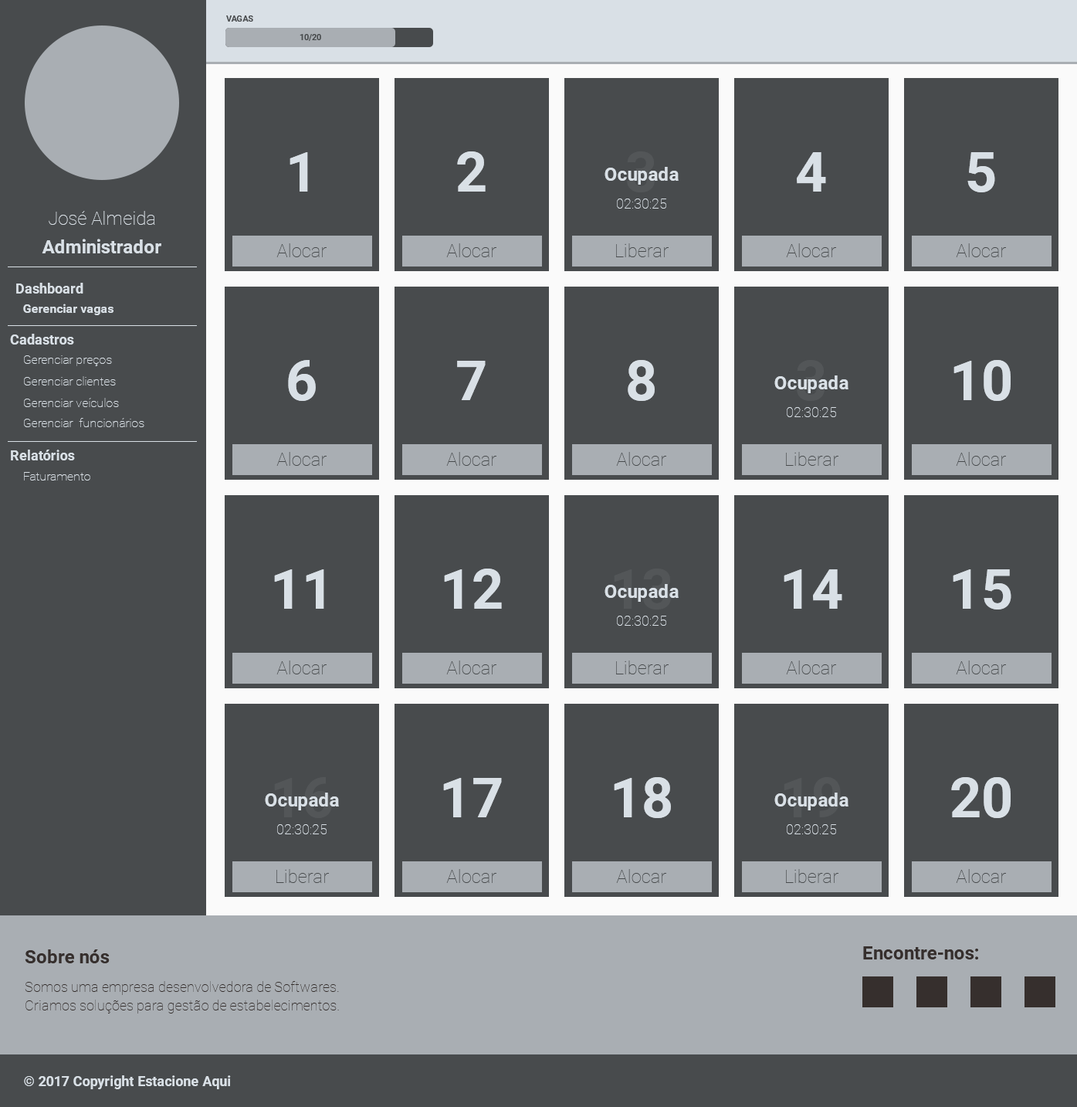
<style>
.page{position:relative;width:1077px;height:1107px;background:#484b4d}
.page>*{position:absolute;margin:0}
.t1{font:8.5px "Roboto-Bold";color:#484b4d;text-transform:uppercase}
.t2{font:8.5px "Roboto-Bold";color:#484b4d}
.t3{font:55.6px "Roboto-Bold";color:#d9e0e6}
.t4{font:18.5px "Roboto-Bold";color:#d9e0e6}
.t5{font:13.9px "Roboto-Thin";color:#d9e0e6}
.t6{font:18.5px "Roboto-Thin";color:#d9e0e6}
.t7{font:18.5px "Roboto-Thin";color:#484b4d}
.t8{font:13.9px "Roboto-Bold";color:#d9e0e6}
.t9{font:12.4px "Roboto-Bold";color:#d9e0e6}
.t10{font:12.4px "Roboto-Thin";color:#d9e0e6}
.t11{font:18.5px "Roboto-Bold";color:#362f2d}
.t12{font:13.9px/18.5px "Roboto-Thin";color:#362f2d}
</style>
<div class="page">
<p class="t1" style="left:226px;top:15px;width:27px;height:7px">Vagas</p>
<p class="t2" style="left:300px;top:34px;width:21px;height:7px">10/20</p>
<p class="t3" style="left:290px;top:152px;width:18px;height:40px">1</p>
<p class="t3" style="left:457px;top:151px;width:29px;height:41px">2</p>
<p class="t3" style="left:797px;top:152px;width:29px;height:40px">4</p>
<p class="t3" style="left:968px;top:152px;width:28px;height:40px">5</p>
<p class="t4" style="left:605px;top:167px;width:74px;height:18px">Ocupada</p>
<p class="t5" style="left:617px;top:198px;width:50px;height:11px">02:30:25</p>
<p class="t6" style="left:49px;top:211px;width:106px;height:14px">José Almeida</p>
<p class="t4" style="left:42px;top:239px;width:119px;height:14px">Administrador</p>
<p class="t7" style="left:276px;top:243px;width:51px;height:14px">Alocar</p>
<p class="t7" style="left:446px;top:243px;width:51px;height:14px">Alocar</p>
<p class="t7" style="left:616px;top:243px;width:53px;height:14px">Liberar</p>
<p class="t7" style="left:786px;top:243px;width:50px;height:14px">Alocar</p>
<p class="t7" style="left:956px;top:243px;width:50px;height:14px">Alocar</p>
<p class="t8" style="left:16px;top:283px;width:67px;height:10px">Dashboard</p>
<p class="t9" style="left:23px;top:304px;width:91px;height:11px">Gerenciar vagas</p>
<p class="t8" style="left:10px;top:334px;width:64px;height:10px">Cadastros</p>
<p class="t10" style="left:24px;top:355px;width:88px;height:11px">Gerenciar preços</p>
<p class="t3" style="left:288px;top:360px;width:28px;height:41px">6</p>
<p class="t3" style="left:457px;top:361px;width:29px;height:39px">7</p>
<p class="t3" style="left:628px;top:360px;width:27px;height:41px">8</p>
<p class="t3" style="left:954px;top:360px;width:57px;height:41px">10</p>
<p class="t10" style="left:24px;top:376px;width:92px;height:9px">Gerenciar clientes</p>
<p class="t4" style="left:775px;top:375px;width:74px;height:18px">Ocupada</p>
<p class="t10" style="left:24px;top:398px;width:95px;height:9px">Gerenciar veículos</p>
<p class="t5" style="left:787px;top:407px;width:49px;height:10px">02:30:25</p>
<p class="t10" style="left:24px;top:418px;width:120px;height:9px">Gerenciar  funcionários</p>
<p class="t8" style="left:11px;top:450px;width:64px;height:10px">Relatórios</p>
<p class="t7" style="left:276px;top:452px;width:51px;height:14px">Alocar</p>
<p class="t7" style="left:446px;top:452px;width:51px;height:14px">Alocar</p>
<p class="t7" style="left:616px;top:452px;width:51px;height:14px">Alocar</p>
<p class="t7" style="left:786px;top:452px;width:53px;height:14px">Liberar</p>
<p class="t7" style="left:956px;top:452px;width:50px;height:14px">Alocar</p>
<p class="t10" style="left:24px;top:472px;width:66px;height:8px">Faturamento</p>
<p class="t3" style="left:274px;top:569px;width:50px;height:40px">11</p>
<p class="t3" style="left:444px;top:568px;width:58px;height:41px">12</p>
<p class="t3" style="left:784px;top:569px;width:59px;height:40px">14</p>
<p class="t3" style="left:953px;top:569px;width:59px;height:40px">15</p>
<p class="t4" style="left:605px;top:584px;width:74px;height:18px">Ocupada</p>
<p class="t5" style="left:617px;top:616px;width:50px;height:10px">02:30:25</p>
<p class="t7" style="left:276px;top:660px;width:51px;height:14px">Alocar</p>
<p class="t7" style="left:446px;top:660px;width:51px;height:14px">Alocar</p>
<p class="t7" style="left:616px;top:660px;width:53px;height:14px">Liberar</p>
<p class="t7" style="left:786px;top:660px;width:50px;height:14px">Alocar</p>
<p class="t7" style="left:956px;top:660px;width:50px;height:14px">Alocar</p>
<p class="t3" style="left:443px;top:778px;width:59px;height:39px">17</p>
<p class="t3" style="left:614px;top:777px;width:57px;height:41px">18</p>
<p class="t3" style="left:952px;top:777px;width:59px;height:41px">20</p>
<p class="t4" style="left:265px;top:792px;width:74px;height:18px">Ocupada</p>
<p class="t4" style="left:775px;top:792px;width:74px;height:18px">Ocupada</p>
<p class="t5" style="left:277px;top:824px;width:50px;height:10px">02:30:25</p>
<p class="t5" style="left:787px;top:824px;width:49px;height:10px">02:30:25</p>
<p class="t7" style="left:276px;top:869px;width:53px;height:14px">Liberar</p>
<p class="t7" style="left:446px;top:869px;width:51px;height:14px">Alocar</p>
<p class="t7" style="left:616px;top:869px;width:51px;height:14px">Alocar</p>
<p class="t7" style="left:786px;top:869px;width:53px;height:14px">Liberar</p>
<p class="t7" style="left:956px;top:869px;width:50px;height:14px">Alocar</p>
<p class="t11" style="left:25px;top:949px;width:85px;height:14px">Sobre nós</p>
<p class="t11" style="left:863px;top:946px;width:116px;height:13px">Encontre-nos:</p>
<p class="t12" style="left:25px;top:981px;width:314px;height:32px">Somos uma empresa desenvolvedora de Softwares. Criamos soluções para gestão de estabelecimentos.</p>
<p class="t8" style="left:24px;top:1075px;width:207px;height:14px">© 2017 Copyright Estacione Aqui</p>
</div>
